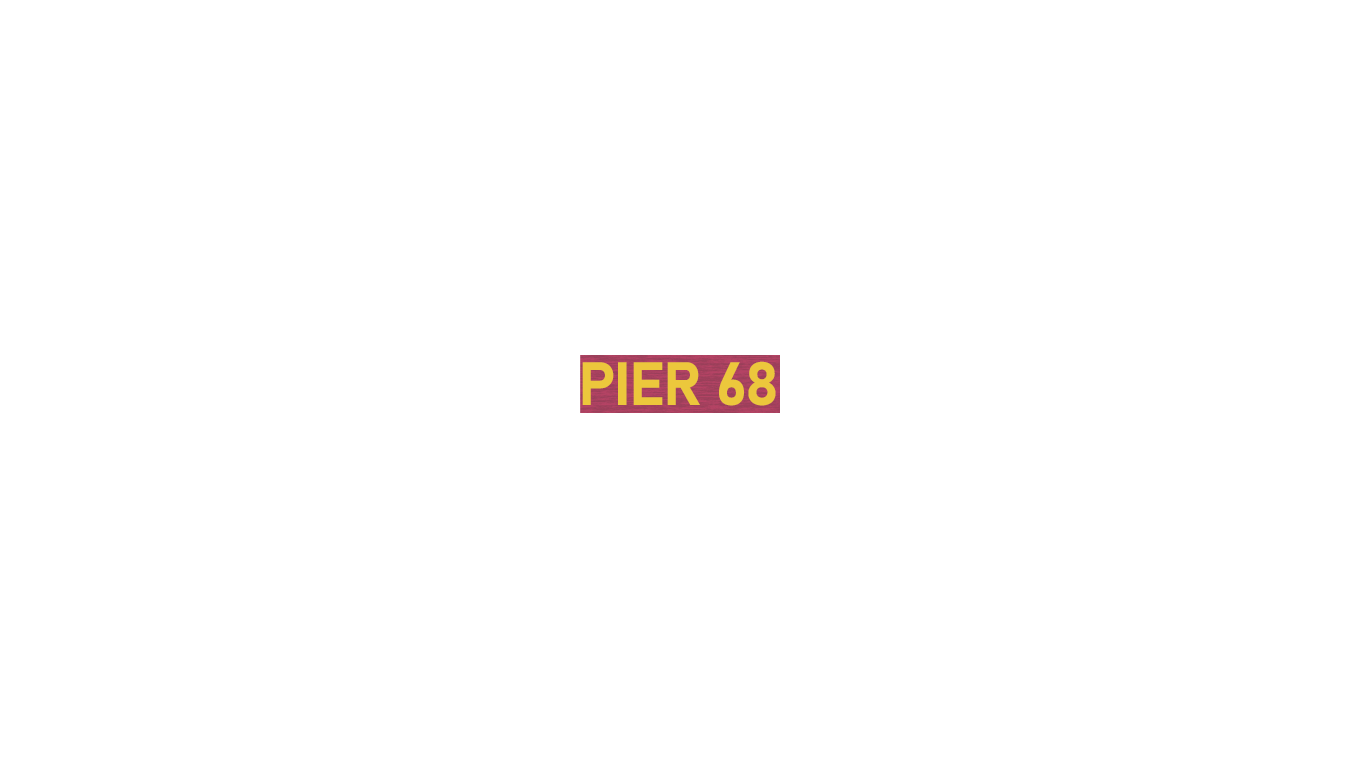
<style>
.page{position:relative;width:1366px;height:768px;background:#ffffff}
.page>*{position:absolute;margin:0}
.t1{font:60.3px "Bahnschrift-Bold";letter-spacing:-0.025em;color:#ecc73c}
</style>
<div class="page">
<p class="t1" style="left:582px;top:361px;width:194px;height:45px">PIER 68</p>
</div>
